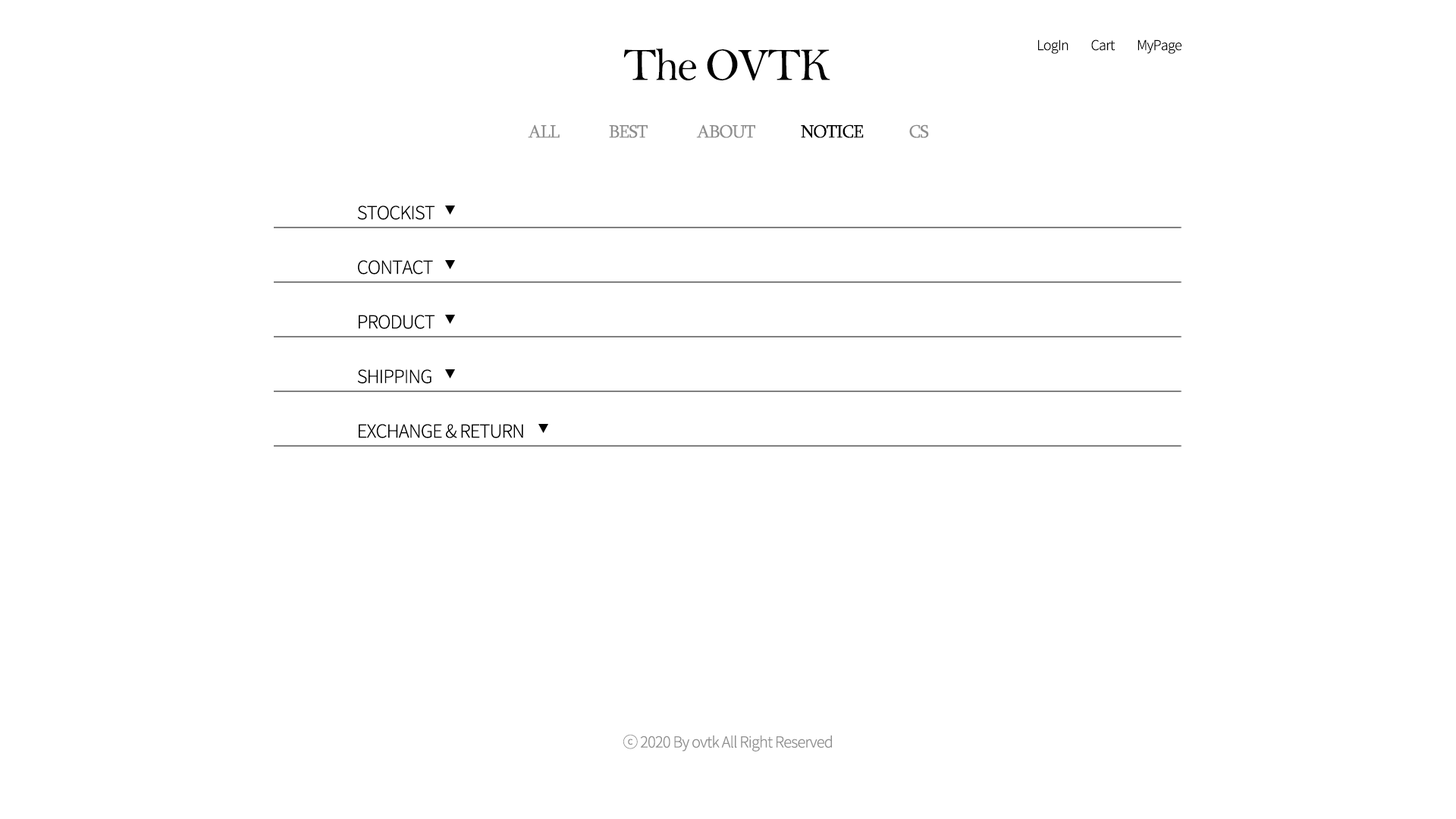
<style>
.page{position:relative;width:1456px;height:819px;background:#ffffff}
.page>*{position:absolute;margin:0}
.t1{font:13.6px "NotoSansKR-Light";letter-spacing:-0.04em;color:#000000}
.t2{font:46.8px "BellMT";letter-spacing:-0.04em;color:#000000}
.t3{font:18.2px "Sylfaen";letter-spacing:-0.04em;color:#8e8e8e}
.t4{font:18.2px "Sylfaen";letter-spacing:-0.04em;color:#000000}
.t5{font:18.2px "NotoSansKR-Light";letter-spacing:-0.04em;color:#000000}
.t6{font:15.2px "NotoSansKR-Light";letter-spacing:-0.04em;color:#8e8e8e}
</style>
<div class="page">
<p class="t1" style="left:1038px;top:39px;width:143px;height:15px">LogIn         Cart         MyPage</p>
<p class="t2" style="left:623px;top:49px;width:207px;height:31px">The OVTK</p>
<p class="t3" style="left:528px;top:124px;width:401px;height:14px">ALL             BEST             ABOUT            <span class="t4">NOTICE </span>           CS</p>
<p class="t5" style="left:357px;top:206px;width:78px;height:14px">STOCKIST</p>
<p class="t5" style="left:358px;top:260px;width:75px;height:15px">CONTACT</p>
<p class="t5" style="left:359px;top:315px;width:76px;height:14px">PRODUCT</p>
<p class="t5" style="left:357px;top:369px;width:74px;height:15px">SHIPPING</p>
<p class="t5" style="left:359px;top:424px;width:164px;height:14px">EXCHANGE &amp; RETURN</p>
<p class="t6" style="left:623px;top:734px;width:209px;height:17px">ⓒ 2020 By ovtk All Right Reserved</p>
</div>
